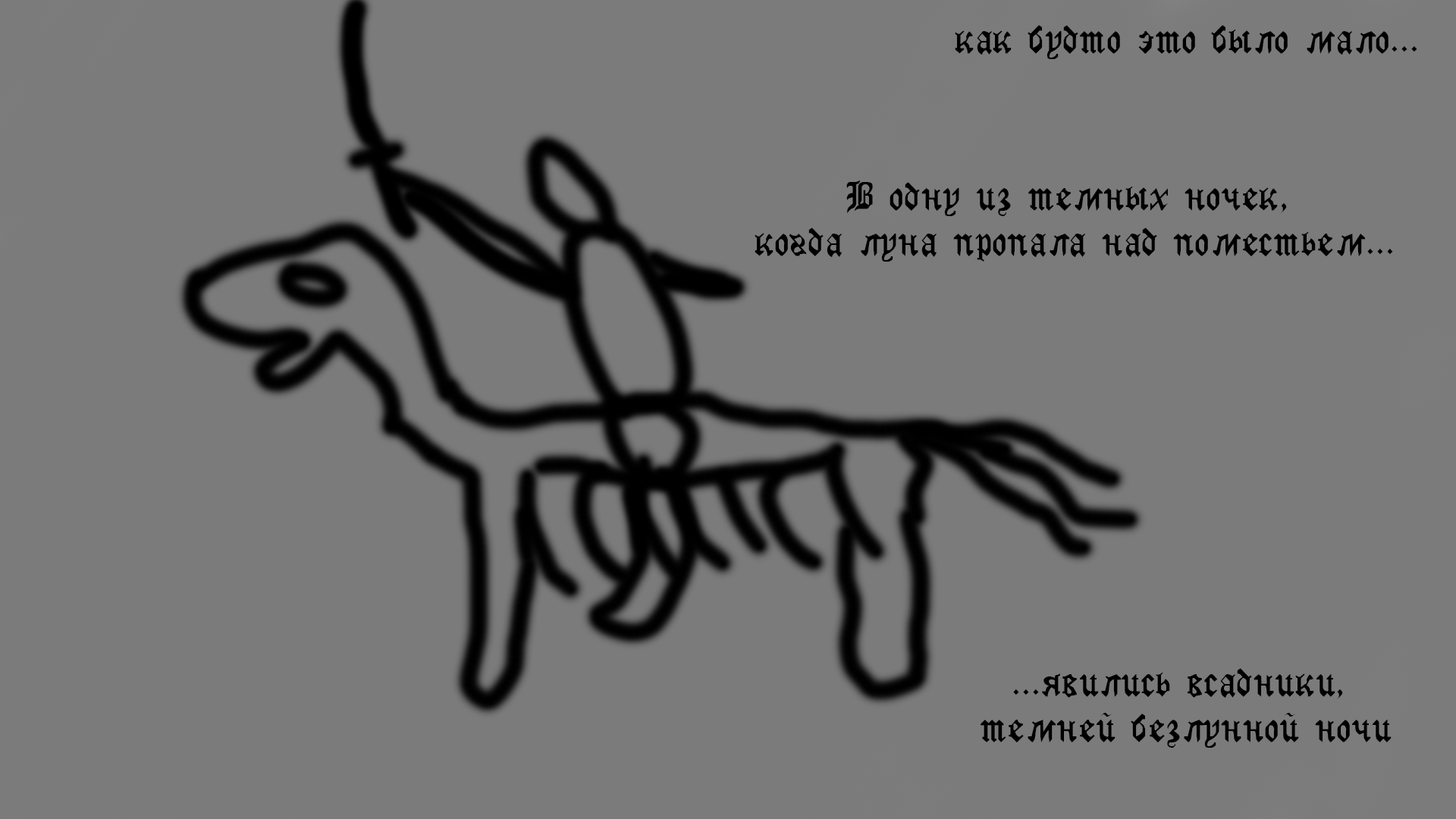
<style>
.page{position:relative;width:1456px;height:819px;background:#7b7b7b}
.page>*{position:absolute;margin:0}
.t1{font:9.1px "GothicRusMedium";color:#000000}
</style>
<div class="page">
<p class="t1" style="left:955px;top:25px;width:462px;height:34px;text-align:center">как будто это было мало...</p>
<p class="t1" style="left:755px;top:180px;width:638px;height:82px;text-align:center">В одну из темных ночек,<br> когда луна пропала над поместьем...</p>
<p class="t1" style="left:981px;top:668px;width:411px;height:80px;text-align:center">...явились всадники,<br> темней безлунной ночи</p>
</div>
